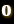
<style>
.page{position:relative;width:14px;height:24px;background:#000000}
.page>*{position:absolute;margin:0}
.t1{font:16px "BritannicBold";color:#ffffff}
</style>
<div class="page">
<p class="t1" style="left:1px;top:5px;width:10px;height:11px">0</p>
</div>
